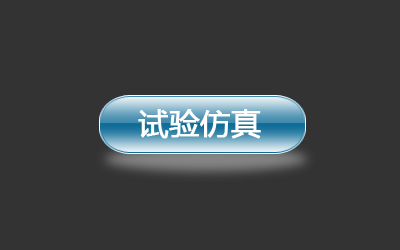
<style>
.page{position:relative;width:400px;height:250px;background:#333333}
.page>*{position:absolute;margin:0}
.t1{font:30px "MicrosoftYaHei";color:#ffffff;font-weight:bold}
</style>
<div class="page">
<p class="t1" style="left:138px;top:109px;width:123px;height:30px">试验仿真</p>
</div>
